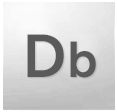
<style>
.page{position:relative;width:117px;height:112px}
.page>*{position:absolute;margin:0}
.t1{font:60px "MuseoSans-700";color:#5a5a5a}
.t2{font:50px "MuseoSans-700";color:#5a5a5a}
</style>
<div class="page">
<p class="t1" style="left:27px;top:34px;width:69px;height:44px">D<span class="t2">b</span></p>
</div>
